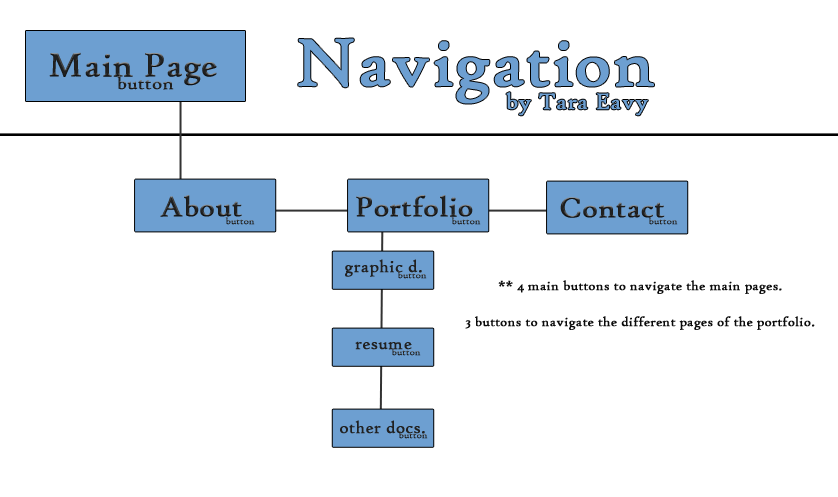
<style>
.page{position:relative;width:838px;height:497px;background:#ffffff}
.page>*{position:absolute;margin:0}
.t1{font:71.7px "HighTowerText-Reg";color:#6d9fd1;font-weight:bold}
.t2{font:35.9px "HighTowerText-Reg";color:#212121;font-weight:bold}
.t3{font:19.5px "HighTowerText-Reg";color:#212121;font-weight:bold}
.t4{font:23.9px "HighTowerText-Reg";color:#6d9fd1;font-weight:bold}
.t5{font:29.9px "HighTowerText-Reg";color:#212121;font-weight:bold}
.t6{font:10px "HighTowerText-Reg";color:#212121;font-weight:bold}
.t7{font:17.9px "HighTowerText-Reg";color:#212121;font-weight:bold}
.t8{font:13.9px/35.9px "HighTowerText-Reg";color:#0b0b0b;font-weight:bold}
</style>
<div class="page">
<p class="t1" style="left:298px;top:38px;width:356px;height:66px">Navigation</p>
<p class="t2" style="left:49px;top:52px;width:168px;height:34px">Main Page</p>
<p class="t3" style="left:117px;top:75px;width:57px;height:15px">button</p>
<p class="t4" style="left:506px;top:92px;width:142px;height:24px">by Tara Eavy</p>
<p class="t5" style="left:160px;top:195px;width:82px;height:22px">About</p>
<p class="t5" style="left:356px;top:195px;width:117px;height:22px">Portfolio</p>
<p class="t5" style="left:560px;top:197px;width:105px;height:21px">Contact</p>
<p class="t6" style="left:225px;top:217px;width:30px;height:8px">button</p>
<p class="t6" style="left:451px;top:217px;width:30px;height:8px">button</p>
<p class="t6" style="left:648px;top:217px;width:30px;height:8px">button</p>
<p class="t7" style="left:345px;top:259px;width:77px;height:18px">graphic d.</p>
<p class="t6" style="left:397px;top:271px;width:30px;height:8px">button</p>
<p class="t8" style="left:465px;top:280px;width:350px;height:50px;text-align:center">** 4 main buttons to navigate the main pages.<br>3 buttons to navigate the different pages of the portfolio.</p>
<p class="t7" style="left:355px;top:341px;width:57px;height:9px">resume</p>
<p class="t6" style="left:391px;top:348px;width:30px;height:8px">button</p>
<p class="t7" style="left:340px;top:420px;width:85px;height:14px">other docs.</p>
<p class="t6" style="left:398px;top:431px;width:30px;height:8px">button</p>
</div>
